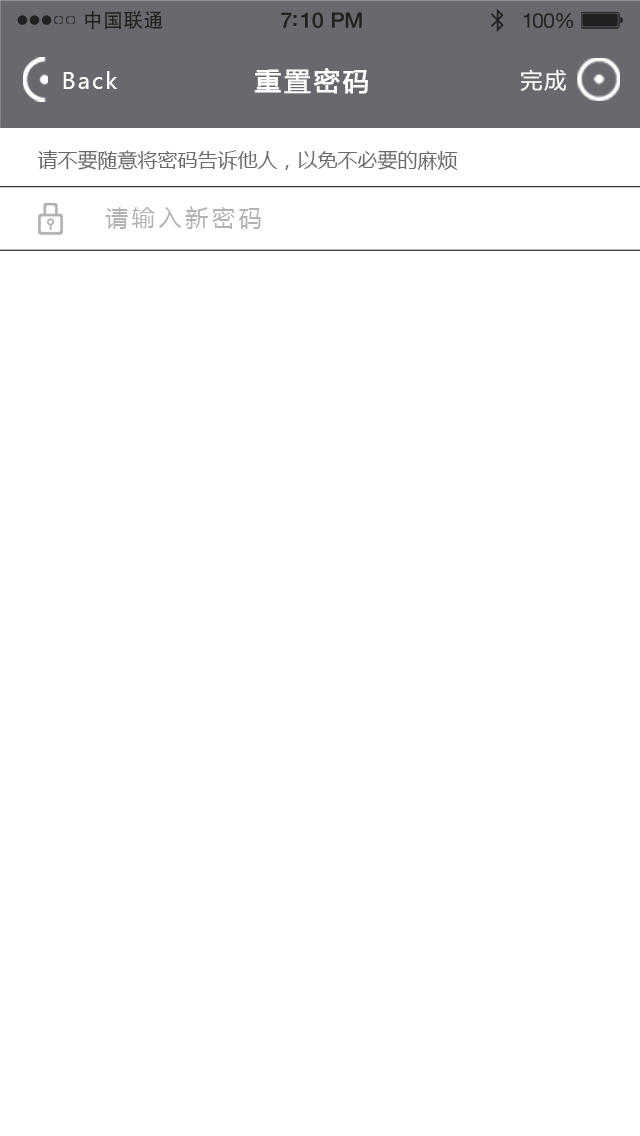
<style>
.page{position:relative;width:640px;height:1136px;background:#ffffff}
.page>*{position:absolute;margin:0}
.t1{font:19.7px "AdobeHeitiStd-Regular";letter-spacing:0.02em;color:#212121}
.t2{font:21.4px "HelveticaNeue-Medium";letter-spacing:-0.02em;color:#212121}
.t3{font:20.6px "HelveticaNeue";letter-spacing:-0.02em;color:#212121}
.t4{font:22px "MicrosoftYaHei";letter-spacing:0.1em;color:#ffffff}
.t5{font:26px "MicrosoftYaHei";letter-spacing:0.1em;color:#ffffff;font-weight:bold}
.t6{font:20px "MicrosoftYaHei";color:#6a6a6a}
.t7{font:23.2px "MicrosoftYaHei";letter-spacing:0.15em;color:#b2b2b2}
</style>
<div class="page">
<p class="t1" style="left:85px;top:10px;width:78px;height:20px">中国联通</p>
<p class="t2" style="left:281px;top:12px;width:81px;height:16px">7:10 PM</p>
<p class="t3" style="left:523px;top:13px;width:50px;height:16px">100%</p>
<p class="t4" style="left:63px;top:71px;width:55px;height:18px">Back</p>
<p class="t5" style="left:254px;top:68px;width:114px;height:26px">重置密码</p>
<p class="t4" style="left:520px;top:69px;width:46px;height:22px">完成</p>
<p class="t6" style="left:37px;top:150px;width:421px;height:20px">请不要随意将密码告诉他人，以免不必要的麻烦</p>
<p class="t7" style="left:105px;top:206px;width:156px;height:23px">请输入新密码</p>
</div>
